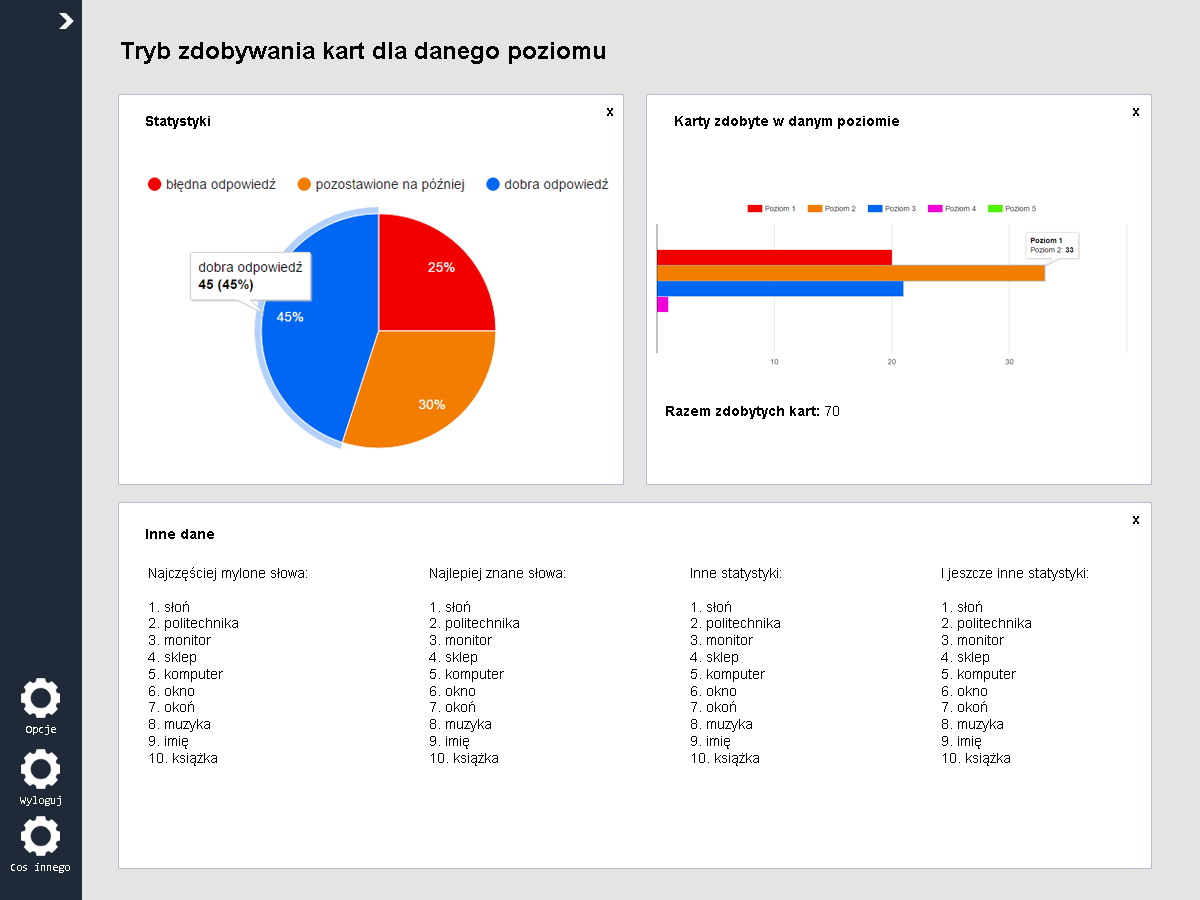
<style>
.page{position:relative;width:1200px;height:900px;background:#ffffff}
.page>*{position:absolute;margin:0}
.t1{font:24px "Arial-BoldMT";color:#000000}
.t2{font:14px "Arial-BoldMT";color:#000000}
.t3{font:14px "ArialMT";color:#000000}
.t4{font:11px "Consolas";color:#fefefe}
</style>
<div class="page">
<p class="t1" style="left:121px;top:42px;width:484px;height:22px">Tryb zdobywania kart dla danego poziomu</p>
<p class="t2" style="left:607px;top:108px;width:6px;height:8px">x</p>
<p class="t2" style="left:1133px;top:108px;width:6px;height:8px">x</p>
<p class="t2" style="left:146px;top:116px;width:64px;height:13px">Statystyki</p>
<p class="t2" style="left:675px;top:116px;width:224px;height:13px">Karty zdobyte w danym poziomie</p>
<p class="t2" style="left:666px;top:406px;width:173px;height:13px">Razem zdobytych kart: <span class="t3">70</span></p>
<p class="t2" style="left:1133px;top:516px;width:6px;height:8px">x</p>
<p class="t2" style="left:146px;top:529px;width:68px;height:10px">Inne dane</p>
<p class="t3" style="left:148px;top:567px;width:159px;height:199px">Najczęściej mylone słowa:<br><br>1. słoń<br>2. politechnika<br>3. monitor<br>4. sklep<br>5. komputer<br>6. okno<br>7. okoń<br>8. muzyka<br>9. imię<br>10. książka</p>
<p class="t3" style="left:429px;top:568px;width:136px;height:198px">Najlepiej znane słowa:<br><br>1. słoń<br>2. politechnika<br>3. monitor<br>4. sklep<br>5. komputer<br>6. okno<br>7. okoń<br>8. muzyka<br>9. imię<br>10. książka</p>
<p class="t3" style="left:690px;top:568px;width:91px;height:198px">Inne statystyki:<br><br>1. słoń<br>2. politechnika<br>3. monitor<br>4. sklep<br>5. komputer<br>6. okno<br>7. okoń<br>8. muzyka<br>9. imię<br>10. książka</p>
<p class="t3" style="left:941px;top:568px;width:147px;height:198px">I jeszcze inne statystyki:<br><br>1. słoń<br>2. politechnika<br>3. monitor<br>4. sklep<br>5. komputer<br>6. okno<br>7. okoń<br>8. muzyka<br>9. imię<br>10. książka</p>
<p class="t4" style="left:26px;top:725px;width:30px;height:10px">Opcje</p>
<p class="t4" style="left:20px;top:796px;width:41px;height:10px">Wyloguj</p>
<p class="t4" style="left:11px;top:863px;width:59px;height:10px">Cos innego</p>
</div>
